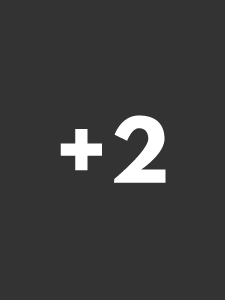
<style>
.page{position:relative;width:225px;height:300px;background:#333333}
.page>*{position:absolute;margin:0}
.t1{font:80px "LeagueSpartan-Bold";letter-spacing:0.04em;color:#ffffff}
</style>
<div class="page">
<p class="t1" style="left:60px;top:115px;width:106px;height:68px">+2</p>
</div>
